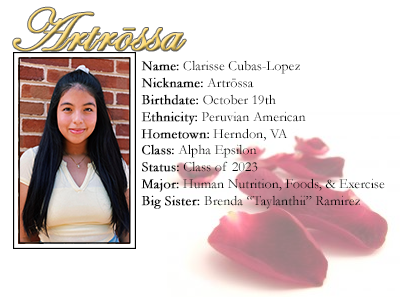
<style>
.page{position:relative;width:400px;height:300px;background:#ffffff}
.page>*{position:absolute;margin:0}
.t1{font:60px "EdwardianScriptITC";font-weight:bold}
.t2{font:14px "Garamond";color:#000000}
.t3{font:14px "Garamond";color:#000000;font-weight:bold}
</style>
<div class="page">
<p class="t1" style="left:13px;top:7px;width:173px;height:44px">Artrossa</p>
<p class="t2" style="left:141px;top:60px;width:244px;height:149px"><span class="t3">Name:</span> Clarisse Cubas-Lopez<br><span class="t3">Nickname:</span> Artrōssa<br><span class="t3">Birthdate:</span> October 19th<br><span class="t3">Ethnicity:</span> Peruvian American<br><span class="t3">Hometown:</span> Herndon, VA<br><span class="t3">Class:</span> Alpha Epsilon<br><span class="t3">Status:</span> Class of 2023<br><span class="t3">Major:</span> Human Nutrition, Foods, &amp; Exercise<br><span class="t3">Big Sister: </span>Brenda “Taylanthii” Ramirez</p>
</div>
